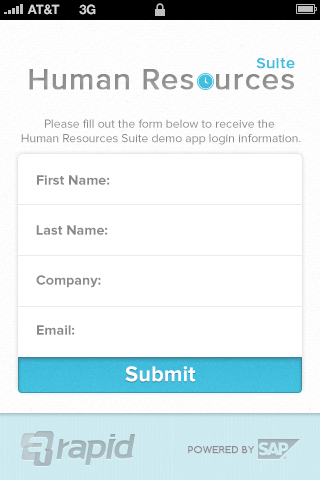
<style>
.page{position:relative;width:320px;height:480px;background:#ffffff}
.page>*{position:absolute;margin:0}
.t1{font:13px "HelveticaNeue-Bold";color:#d4d4d4;text-transform:uppercase}
.t2{font:15px "ProximaNova-Regular";letter-spacing:0.036em;color:#41bedd;font-weight:bold}
.t3{font:30px "ProximaNova-Regular";letter-spacing:0.023em;color:#919191;font-weight:bold}
.t4{font:12px "ProximaNova-Regular";color:#898989}
.t5{font:14px/25px "ProximaNova-Bold";color:#898989}
.t6{font:22px "ProximaNova-Bold";color:#ffffff}
.t7{font:9px "Comfortaa";letter-spacing:0.036em;color:#898c96;text-transform:uppercase;scale:1.11 1}
</style>
<div class="page">
<p class="t1" style="left:27px;top:4px;width:33px;height:11px">AT&amp;t</p>
<p class="t1" style="left:79px;top:4px;width:17px;height:11px">3G</p>
<p class="t2" style="left:256px;top:58px;width:39px;height:11px">Suite</p>
<p class="t3" style="left:29px;top:69px;width:265px;height:21px">Human Res  urces</p>
<p class="t4" style="left:21px;top:119px;width:280px;height:26px;text-align:center">Please fill out the form below to receive the <br>Human Resources Suite demo app login information.</p>
<p class="t5" style="left:36px;top:175px;width:74px;height:160px">First Name:<br><br>Last Name:<br><br>Company:<br><br>Email:</p>
<p class="t6" style="left:125px;top:366px;width:71px;height:16px">Submit</p>
<p class="t7" style="left:188px;top:446px;width:66px;height:7px">POWERED BY</p>
</div>
